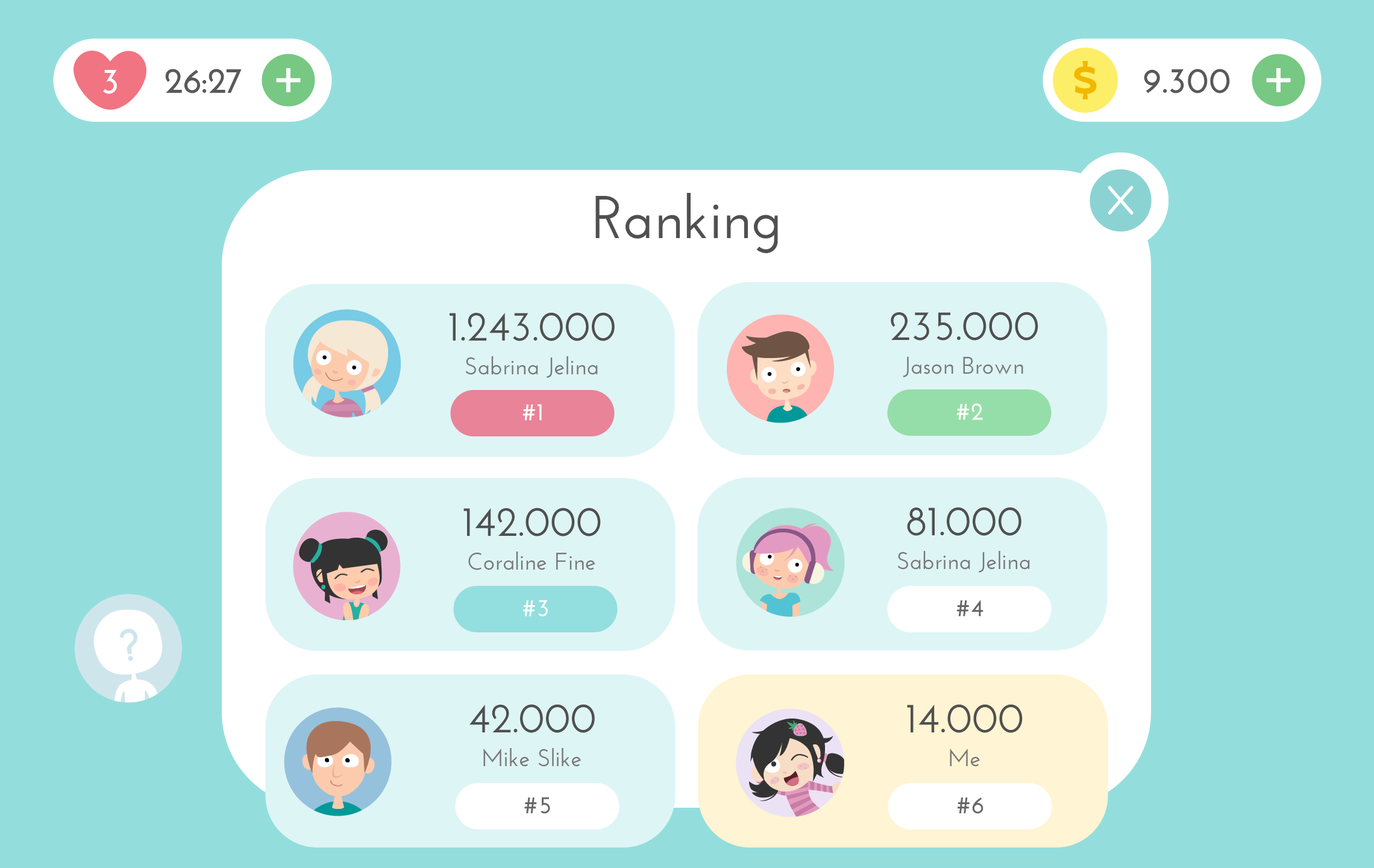
<style>
.page{position:relative;width:1374px;height:868px;background:#93dedd}
.page>*{position:absolute;margin:0}
.t1{font:36.2px "JosefinSans-Bold";color:#ffffff}
.t2{font:36.2px "JosefinSans-Bold";color:#595959}
.t3{font:60.3px "JosefinSans-SemiBold";color:#505050}
.t4{font:42.2px "JosefinSans-SemiBold";color:#505050}
.t5{font:24.1px "JosefinSans-SemiBold";color:#777777}
.t6{font:24.1px "JosefinSans-SemiBold";color:#ffffff;font-weight:bold}
.t7{font:24.1px "JosefinSans-SemiBold";color:#666666;font-weight:bold}
</style>
<div class="page">
<p class="t1" style="left:103px;top:70px;width:14px;height:24px">3</p>
<p class="t2" style="left:165px;top:69px;width:77px;height:24px">26:27</p>
<p class="t2" style="left:1144px;top:69px;width:86px;height:24px">9.300</p>
<p class="t3" style="left:595px;top:193px;width:183px;height:60px">Ranking</p>
<p class="t4" style="left:450px;top:312px;width:165px;height:29px">1.243.000</p>
<p class="t4" style="left:891px;top:312px;width:147px;height:28px">235.000</p>
<p class="t5" style="left:465px;top:356px;width:133px;height:22px">Sabrina Jelina</p>
<p class="t5" style="left:903px;top:357px;width:120px;height:20px">Jason Brown</p>
<p class="t6" style="left:523px;top:404px;width:19px;height:17px">#1</p>
<p class="t6" style="left:956px;top:403px;width:27px;height:17px">#2</p>
<p class="t4" style="left:463px;top:507px;width:138px;height:29px">142.000</p>
<p class="t4" style="left:907px;top:507px;width:114px;height:29px">81.000</p>
<p class="t5" style="left:468px;top:551px;width:127px;height:19px">Coraline Fine</p>
<p class="t5" style="left:897px;top:551px;width:133px;height:22px">Sabrina Jelina</p>
<p class="t6" style="left:523px;top:600px;width:25px;height:17px">#3</p>
<p class="t7" style="left:956px;top:600px;width:28px;height:17px">#4</p>
<p class="t4" style="left:469px;top:704px;width:126px;height:29px">42.000</p>
<p class="t4" style="left:907px;top:704px;width:116px;height:29px">14.000</p>
<p class="t5" style="left:483px;top:748px;width:98px;height:19px">Mike Slike</p>
<p class="t5" style="left:950px;top:748px;width:30px;height:19px">Me</p>
<p class="t7" style="left:524px;top:797px;width:26px;height:17px">#5</p>
<p class="t7" style="left:957px;top:797px;width:27px;height:17px">#6</p>
</div>
